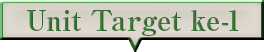
<style>
.page{position:relative;width:264px;height:52px;background:#ffffff}
.page>*{position:absolute;margin:0}
.t1{font:28px "RyuminPro-ExBold";color:#3f723a}
</style>
<div class="page">
<p class="t1" style="left:26px;top:10px;width:213px;height:26px">Unit Target ke-1</p>
</div>
